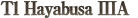
<style>
.page{position:relative;width:138px;height:18px;background:#ffffff}
.page>*{position:absolute;margin:0}
.t1{font:18px "RyuminPro-ExBold";letter-spacing:-0.08em;color:#4a3f32;font-weight:bold;scale:0.9 1}
</style>
<div class="page">
<p class="t1" style="left:0px;top:1px;width:130px;height:18px">T1 Hayabusa IIIA</p>
</div>
